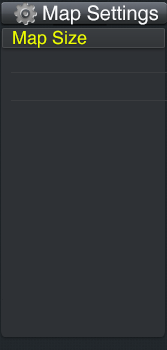
<style>
.page{position:relative;width:167px;height:350px;background:#2e3135}
.page>*{position:absolute;margin:0}
.t1{font:20px "Helvetica";color:#f9fafc}
.t2{font:18px "Helvetica";color:#eefd00}
</style>
<div class="page">
<p class="t1" style="left:43px;top:5px;width:115px;height:20px">Map Settings</p>
<p class="t2" style="left:13px;top:30px;width:74px;height:18px">Map Size</p>
</div>
